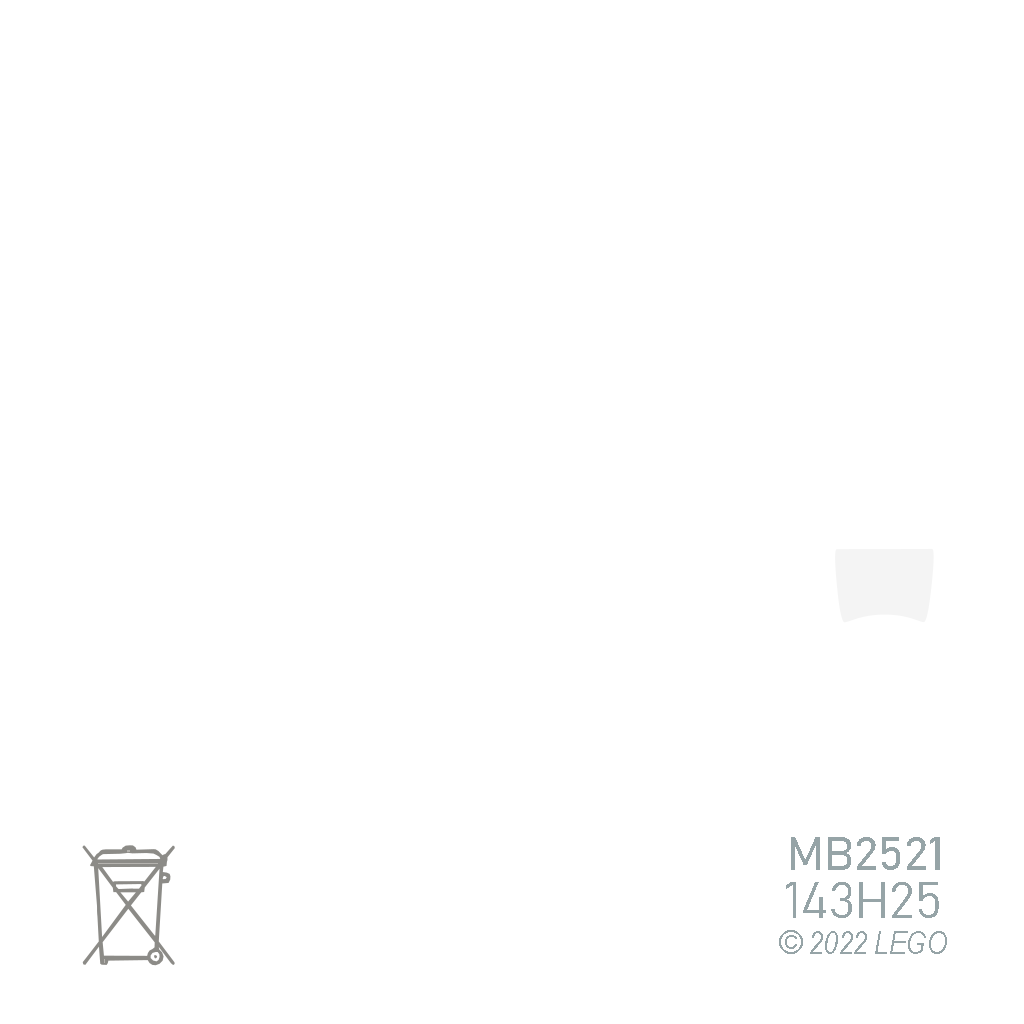
<style>
.page{position:relative;width:1024px;height:1024px;background:#ffffff}
.page>*{position:absolute;margin:0}
.t1{font:47px "Bahnschrift-SemiLight";color:#96a4a7}
.t2{font:50px "Bahnschrift-Light";color:#96a4a7}
.t3{font:32px "ArialNarrow-Italic";color:#96a4a7}
.t4{font:32px "TwCenMT-Condensed";color:#96a4a7}
</style>
<div class="page">
<p class="t1" style="left:791px;top:837px;width:149px;height:33px">MB2521</p>
<p class="t2" style="left:786px;top:882px;width:153px;height:36px">143H25</p>
<p class="t3" style="left:779px;top:930px;width:168px;height:24px"><span class="t4">© </span>2022 LEGO</p>
</div>
